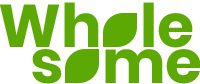
<style>
.page{position:relative;width:200px;height:84px;background:#ffffff}
.page>*{position:absolute;margin:0}
.t1{font:60px "Poppins-Bold";color:#5ca904}
</style>
<div class="page">
<p class="t1" style="left:0px;top:2px;width:99px;height:45px">Wh</p>
<p class="t1" style="left:143px;top:2px;width:50px;height:46px">le</p>
<p class="t1" style="left:32px;top:49px;width:30px;height:35px">s</p>
<p class="t1" style="left:105px;top:49px;width:96px;height:35px">me</p>
</div>
